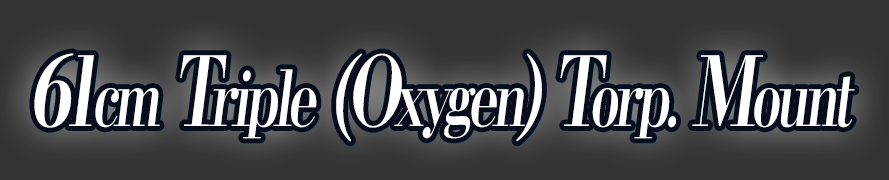
<style>
.page{position:relative;width:889px;height:180px;background:#333333}
.page>*{position:absolute;margin:0}
.t1{font:76.8px "KochoStd-Heavy";letter-spacing:-0.08em;color:#ffffff;font-style:italic;scale:0.71 1}
.t2{font:96px "KochoStd-Heavy";letter-spacing:-0.08em;color:#ffffff;font-style:italic;scale:0.71 1}
</style>
<div class="page">
<p class="t1" style="left:34px;top:53px;width:821px;height:89px"><span class="t2">61</span>cm<span class="t2"> T</span>riple<span class="t2"> (O</span>xygen<span class="t2">) T</span>orp.<span class="t2"> M</span>ount</p>
</div>
